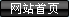
<style>
.page{position:relative;width:69px;height:17px}
.page>*{position:absolute;margin:0}
.t1{font:12px "SimSun";letter-spacing:0.04em;color:#ffffff}
</style>
<div class="page">
<p class="t1" style="left:11px;top:3px;width:48px;height:11px">网站首页</p>
</div>
